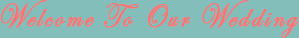
<style>
.page{position:relative;width:299px;height:38px;background:#83bebb}
.page>*{position:absolute;margin:0}
.t1{font:34.2px "EdwardianScriptITC";letter-spacing:0.08em;color:#ff7373;font-weight:bold;scale:0.84 1}
</style>
<div class="page">
<p class="t1" style="left:0px;top:0px;width:299px;height:38px">Welcome To Our Wedding</p>
</div>
